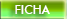
<style>
.page{position:relative;width:67px;height:19px}
.page>*{position:absolute;margin:0}
.t1{font:12px "FuturaBT-Medium";color:#ffffff}
</style>
<div class="page">
<p class="t1" style="left:15px;top:5px;width:35px;height:9px">FICHA</p>
</div>
